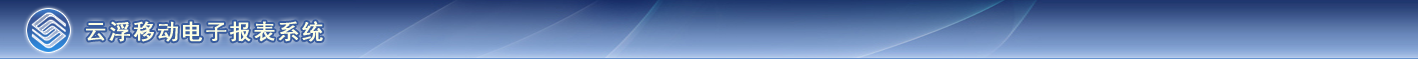
<style>
.page{position:relative;width:1418px;height:59px}
.page>*{position:absolute;margin:0}
.t1{font:21.5px "SimHei";letter-spacing:0.1em;color:#feffe2;font-weight:bold}
</style>
<div class="page">
<p class="t1" style="left:86px;top:21px;width:237px;height:21px">云浮移动电子报表系统</p>
</div>
